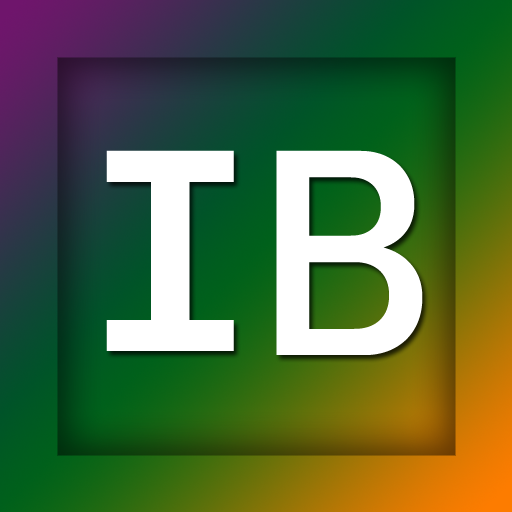
<style>
.page{position:relative;width:512px;height:512px}
.page>*{position:absolute;margin:0}
.t1{font:314px "Consolas-Bold";color:#ffffff}
.t2{font:250px "OPPOSans-B";color:#ffffff}
</style>
<div class="page">
<p class="t1" style="left:106px;top:150px;width:128px;height:201px">I</p>
<p class="t2" style="left:276px;top:150px;width:147px;height:205px">B</p>
</div>
